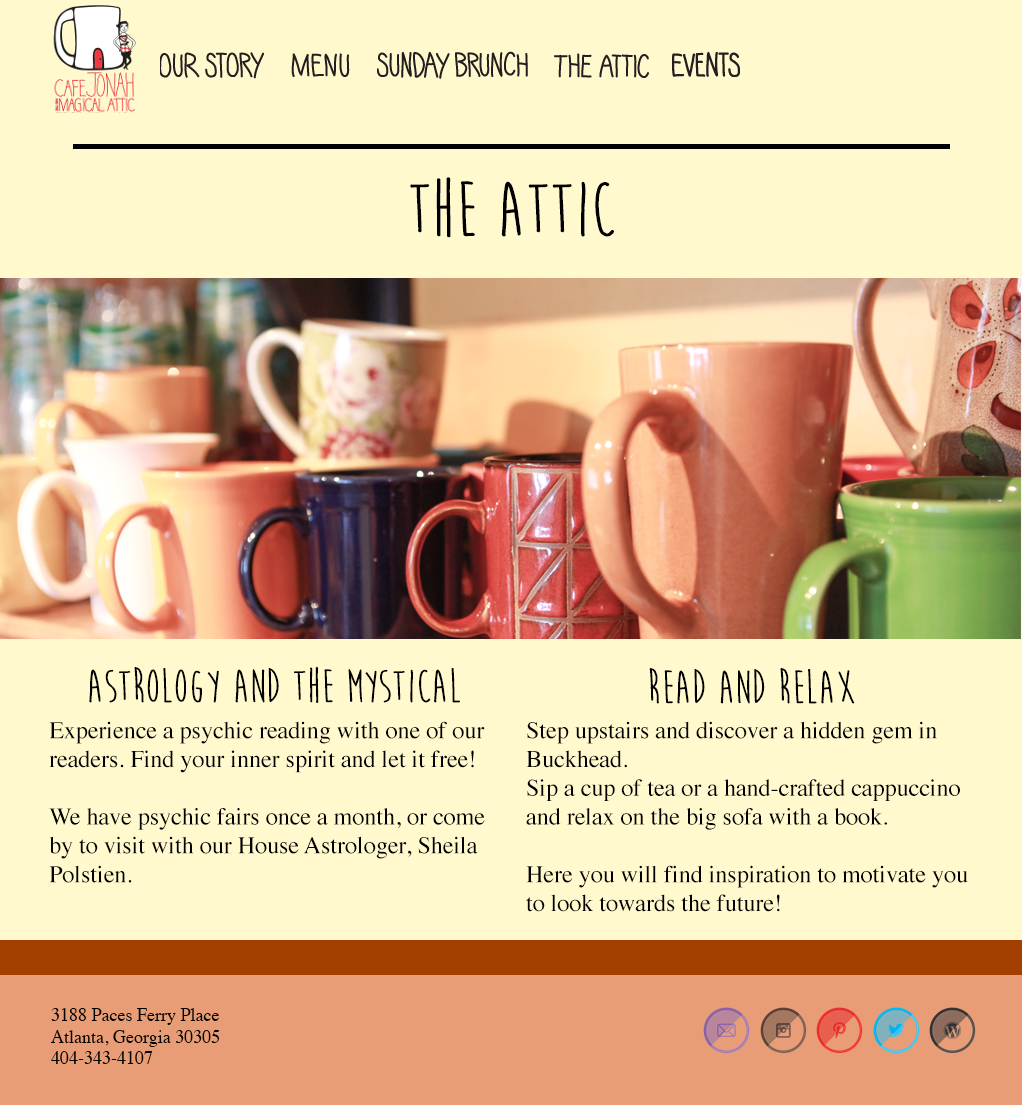
<style>
.page{position:relative;width:1022px;height:1105px;background:#fff9cd}
.page>*{position:absolute;margin:0}
.t1{font:80px "MoonFlowerBold";color:#000000}
.t2{font:48px "MoonFlowerBold";color:#000000}
.t3{font:24px "Times-Roman";color:#000000}
.t4{font:18px "Times-Roman";color:#000000}
</style>
<div class="page">
<p class="t1" style="left:410px;top:177px;width:204px;height:61px">The Attic</p>
<p class="t2" style="left:89px;top:666px;width:371px;height:37px">Astrology and the Mystical</p>
<p class="t2" style="left:649px;top:668px;width:206px;height:36px">Read and Relax</p>
<p class="t3" style="left:49px;top:721px;width:436px;height:162px">Experience a psychic reading with one of our readers. Find your inner spirit and let it free!<br><br>We have psychic fairs once a month, or come by to visit with our House Astrologer, Sheila Polstien.</p>
<p class="t3" style="left:526px;top:721px;width:442px;height:191px">Step upstairs and discover a hidden gem in Buckhead. <br>Sip a cup of tea or a hand-crafted cappuccino and relax on the big sofa with a book.<br><br>Here you will find inspiration to motivate you to look towards the future!</p>
<p class="t4" style="left:50px;top:1008px;width:170px;height:56px">3188 Paces Ferry Place <br>Atlanta, Georgia 30305<br>404-343-4107</p>
</div>
